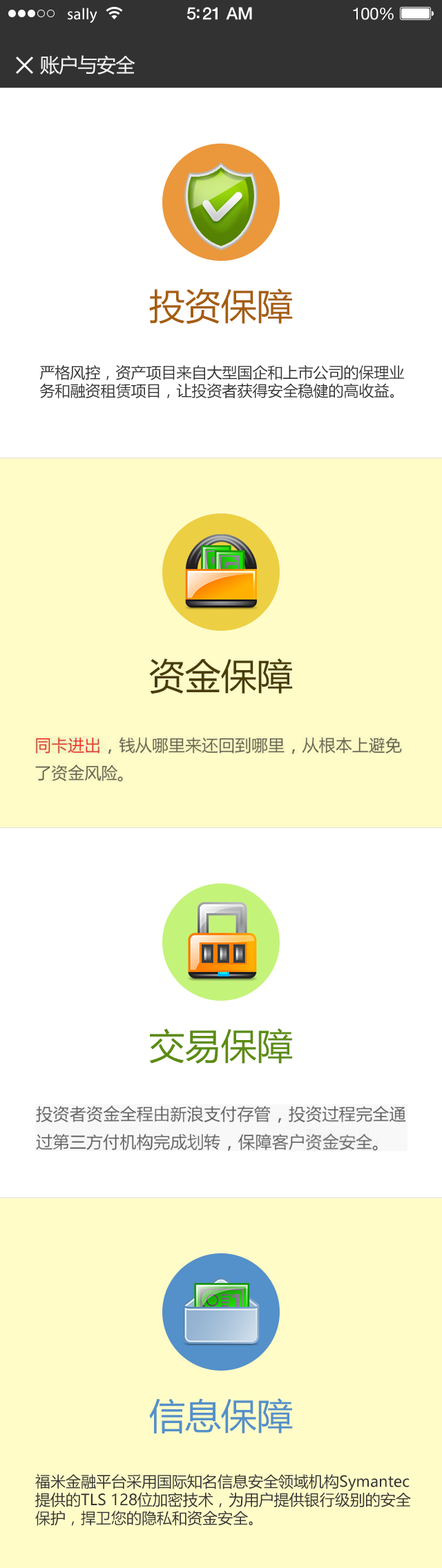
<style>
.page{position:relative;width:442px;height:1568px;background:#ffffff}
.page>*{position:absolute;margin:0}
.t1{font:15.9px "MyriadPro-Regular";letter-spacing:0.02em;color:#ffffff}
.t2{font:17.3px "HelveticaNeue-Medium";letter-spacing:-0.02em;color:#ffffff}
.t3{font:16.6px "HelveticaNeue";letter-spacing:-0.02em;color:#ffffff}
.t4{font:19.3px "MicrosoftYaHei";letter-spacing:-0.02em;color:#f3f3f3}
.t5{font:35.9px "MicrosoftYaHei";color:#a55d0e}
.t6{font:15.2px "MicrosoftYaHei";color:#323232}
.t7{font:35.9px "MicrosoftYaHei";color:#483c07}
.t8{font:35.9px "MicrosoftYaHei";color:#5c8c10}
.t9{font:35.9px "MicrosoftYaHei";color:#5490c9}
</style>
<div class="page">
<p class="t1" style="left:68px;top:8px;width:29px;height:15px">sally</p>
<p class="t2" style="left:187px;top:7px;width:65px;height:13px">5:21 AM</p>
<p class="t3" style="left:353px;top:8px;width:40px;height:12px">100%</p>
<p class="t4" style="left:40px;top:55px;width:95px;height:20px">账户与安全</p>
<p class="t5" style="left:149px;top:288px;width:144px;height:36px">投资保障</p>
<p class="t6" style="left:39px;top:365px;width:365px;height:34px">严格风控，资产项目来自大型国企和上市公司的保理业务和融资租赁项目，让投资者获得安全稳健的高收益。</p>
<p class="t7" style="left:149px;top:658px;width:144px;height:36px">资金保障</p>
<p class="t8" style="left:149px;top:1028px;width:144px;height:36px">交易保障</p>
<p class="t9" style="left:149px;top:1398px;width:144px;height:35px">信息保障</p>
<p class="t6" style="left:35px;top:1474px;width:376px;height:52px">福米金融平台采用国际知名信息安全领域机构Symantec提供的TLS 128位加密技术，为用户提供银行级别的安全保护，捍卫您的隐私和资金安全。</p>
</div>
